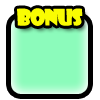
<style>
.page{position:relative;width:100px;height:100px;background:#8cfbbb}
.page>*{position:absolute;margin:0}
.t1{font:21px "ShowcardGothic-Reg";letter-spacing:-0.05em;color:#f9fc02;font-weight:bold}
</style>
<div class="page">
<p class="t1" style="left:17px;top:8px;width:66px;height:18px">BONUS</p>
</div>
